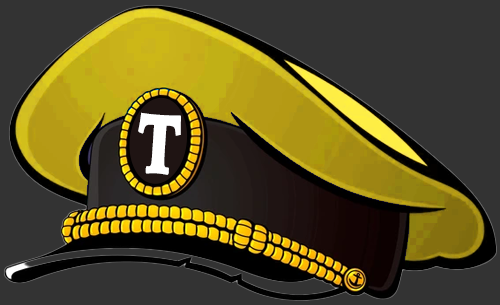
<style>
.page{position:relative;width:500px;height:305px;background:#333333}
.page>*{position:absolute;margin:0}
.t1{font:82.8px "IowanOldStyle-Black";letter-spacing:0.1em;color:#ffffff;font-weight:bold;scale:0.64 1}
</style>
<div class="page">
<p class="t1" style="left:138px;top:112px;width:43px;height:63px;rotate:4deg">T</p>
</div>
